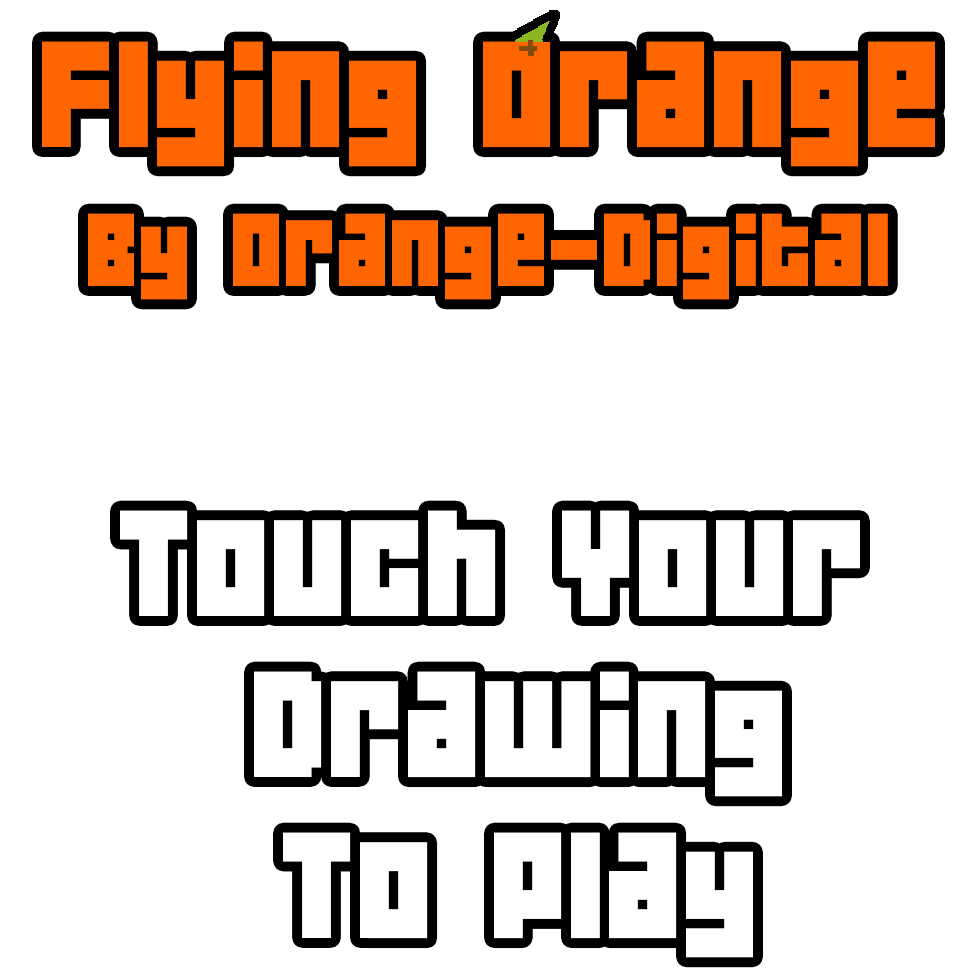
<style>
.page{position:relative;width:980px;height:980px;background:#ffffff}
.page>*{position:absolute;margin:0}
.t1{font:134px "04b19";color:#ff6600}
.t2{font:92px "04b19";color:#ff6600}
.t3{font:134px "04b19";color:#ffffff}
</style>
<div class="page">
<p class="t1" style="left:42px;top:41px;width:893px;height:126px">Flying Orange</p>
<p class="t2" style="left:88px;top:213px;width:800px;height:87px">By Orange-Digital</p>
<p class="t3" style="left:120px;top:510px;width:740px;height:448px;text-align:center">Touch Your <br>Drawing<br>To Play</p>
</div>
